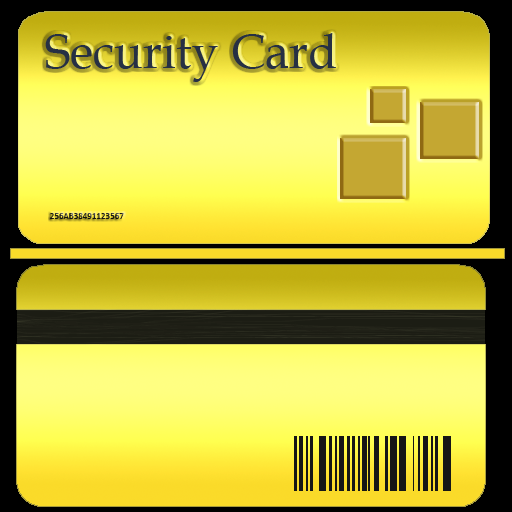
<style>
.page{position:relative;width:512px;height:512px}
.page>*{position:absolute;margin:0}
.t1{font:48px "BookAntiqua";color:#102140}
.t2{font:9px "Calibri";color:#161616}
</style>
<div class="page">
<p class="t1" style="left:45px;top:33px;width:291px;height:49px">Security Card</p>
<p class="t2" style="left:50px;top:213px;width:74px;height:6px">256AB38491123567</p>
</div>
